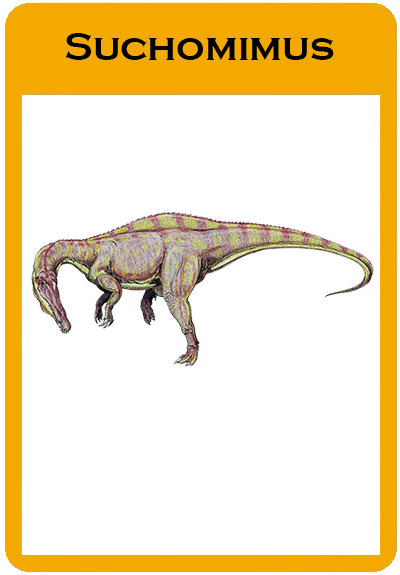
<style>
.page{position:relative;width:400px;height:575px;background:#ffffff}
.page>*{position:absolute;margin:0}
.t1{font:40px "CopperplateGothic-Bold";color:#000000}
</style>
<div class="page">
<p class="t1" style="left:65px;top:33px;width:269px;height:27px">Suchomimus</p>
</div>
